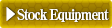
<style>
.page{position:relative;width:112px;height:28px}
.page>*{position:absolute;margin:0}
.t1{font:15px "RyuminPro-ExBold";letter-spacing:-0.08em;color:#ffffff;scale:0.9 1}
</style>
<div class="page">
<p class="t1" style="left:6px;top:7px;width:103px;height:15px">▶Stock Equipment</p>
</div>
